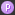
<style>
.page{position:relative;width:15px;height:15px;background:#333333}
.page>*{position:absolute;margin:0}
.t1{font:9px "LucidaSansUnicode";color:#fbfbfb}
</style>
<div class="page">
<p class="t1" style="left:6px;top:4px;width:4px;height:7px">p</p>
</div>
